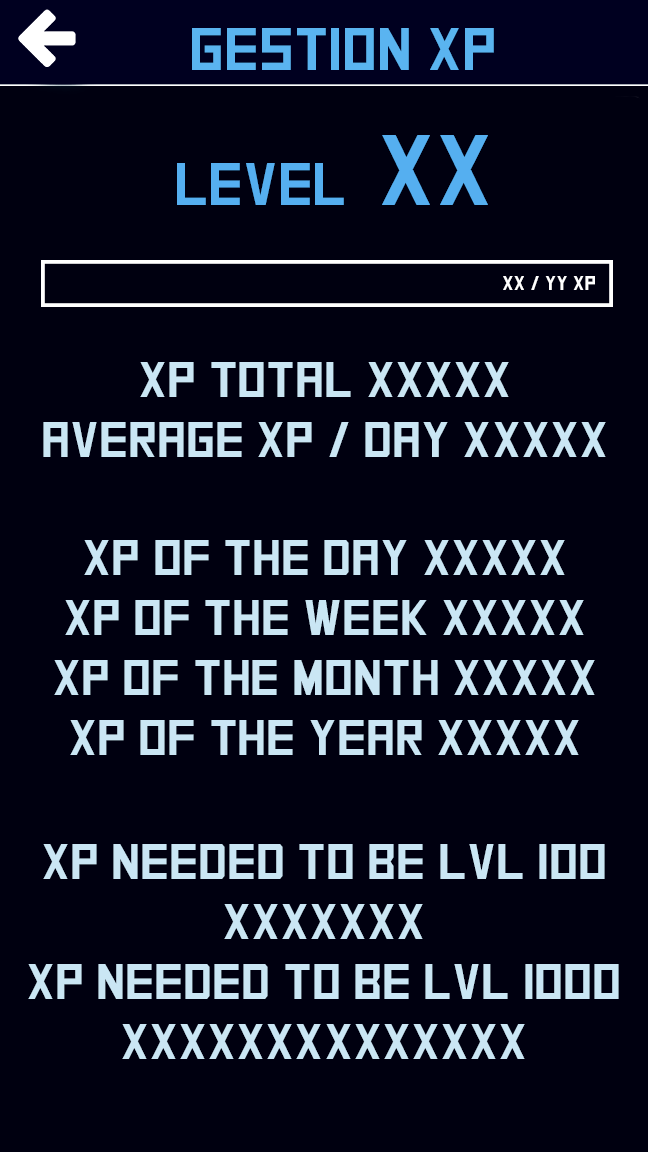
<style>
.page{position:relative;width:648px;height:1152px;background:#000010}
.page>*{position:absolute;margin:0}
.t1{font:60px "SquareFont";color:#5ab4f0}
.t2{font:60px "SquareFont";color:#55aff0}
.t3{font:100px "SquareFont";color:#55aff0}
.t4{font:20px "SquareFont";color:#ffffff}
.t5{font:50px "SquareFont";color:#cae6f4}
</style>
<div class="page">
<p class="t1" style="left:192px;top:28px;width:302px;height:42px">Gestion XP</p>
<p class="t2" style="left:177px;top:135px;width:311px;height:70px">level  <span class="t3">XX</span></p>
<p class="t4" style="left:503px;top:276px;width:92px;height:14px">XX / YY xP</p>
<p class="t5" style="left:43px;top:362px;width:563px;height:95px;text-align:center">xp total XXXXX<br>Average xp / day XXXXX</p>
<p class="t5" style="left:54px;top:540px;width:541px;height:215px;text-align:center">xp of the day XXXXX<br>xp of the week XXXXX<br>xp of the Month XXXXX<br>xp of the year XXXXX</p>
<p class="t5" style="left:28px;top:844px;width:591px;height:215px;text-align:center">XP needed to be lvl 100<br>XXXXXXX<br>XP needed to be lvl 1000<br>XXXXXXXXXXXXXX</p>
</div>
